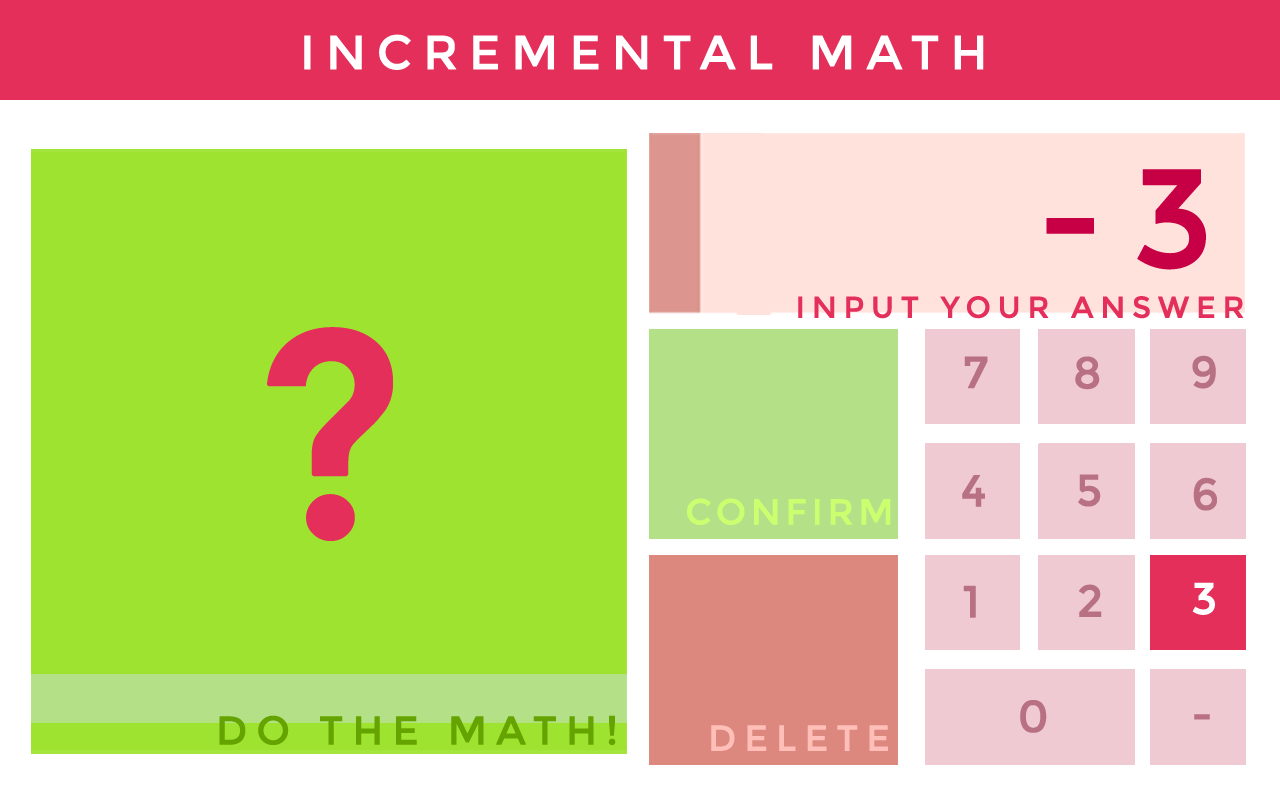
<style>
.page{position:relative;width:1280px;height:800px;background:#9ee330}
.page>*{position:absolute;margin:0}
.t1{font:48px "Montserrat-Regular";letter-spacing:0.2em;color:#ffffff;text-transform:uppercase;font-weight:bold}
.t2{font:139.7px "Montserrat-Regular";letter-spacing:0.2em;color:#c70046;text-transform:uppercase;font-weight:bold}
.t3{font:30px "Montserrat-Regular";letter-spacing:0.2em;color:#e42f5a;text-transform:uppercase;font-weight:bold}
.t4{font:292.4px "Montserrat-Regular";letter-spacing:0.2em;color:#e42f5a;text-transform:uppercase;font-weight:bold}
.t5{font:44.5px "Montserrat-Regular";letter-spacing:0.2em;color:#b77182;text-transform:uppercase;font-weight:bold}
.t6{font:36px "Montserrat-Regular";letter-spacing:0.1em;color:#ccff6f;text-transform:uppercase;font-weight:bold}
.t7{font:44.5px "Montserrat-Regular";letter-spacing:0.2em;color:#ffffff;text-transform:uppercase;font-weight:bold}
.t8{font:40px "Montserrat-Regular";letter-spacing:0.2em;color:#65a300;text-transform:uppercase;font-weight:bold}
.t9{font:36px "Montserrat-Regular";letter-spacing:0.2em;color:#ffbfb8;text-transform:uppercase;font-weight:bold}
</style>
<div class="page">
<p class="t1" style="left:304px;top:34px;width:680px;height:36px">Incremental Math</p>
<p class="t2" style="left:1046px;top:169px;width:160px;height:101px">-3</p>
<p class="t3" style="left:798px;top:296px;width:446px;height:23px">Input your Answer</p>
<p class="t4" style="left:267px;top:327px;width:126px;height:214px">?</p>
<p class="t5" style="left:964px;top:356px;width:24px;height:33px">7</p>
<p class="t5" style="left:1075px;top:356px;width:25px;height:34px">8</p>
<p class="t5" style="left:1192px;top:355px;width:24px;height:34px">9</p>
<p class="t5" style="left:962px;top:475px;width:23px;height:32px">4</p>
<p class="t5" style="left:1078px;top:474px;width:23px;height:33px">5</p>
<p class="t5" style="left:1193px;top:477px;width:24px;height:34px">6</p>
<p class="t6" style="left:687px;top:498px;width:204px;height:27px">Confirm</p>
<p class="t7" style="left:1192px;top:582px;width:23px;height:33px">3</p>
<p class="t5" style="left:963px;top:585px;width:13px;height:33px">1</p>
<p class="t5" style="left:1079px;top:584px;width:23px;height:33px">2</p>
<p class="t5" style="left:1020px;top:700px;width:27px;height:33px">0</p>
<p class="t8" style="left:219px;top:715px;width:397px;height:31px">Do the Math!</p>
<p class="t9" style="left:711px;top:725px;width:177px;height:26px">Delete</p>
<p class="t5" style="left:1194px;top:714px;width:16px;height:6px">-</p>
</div>
